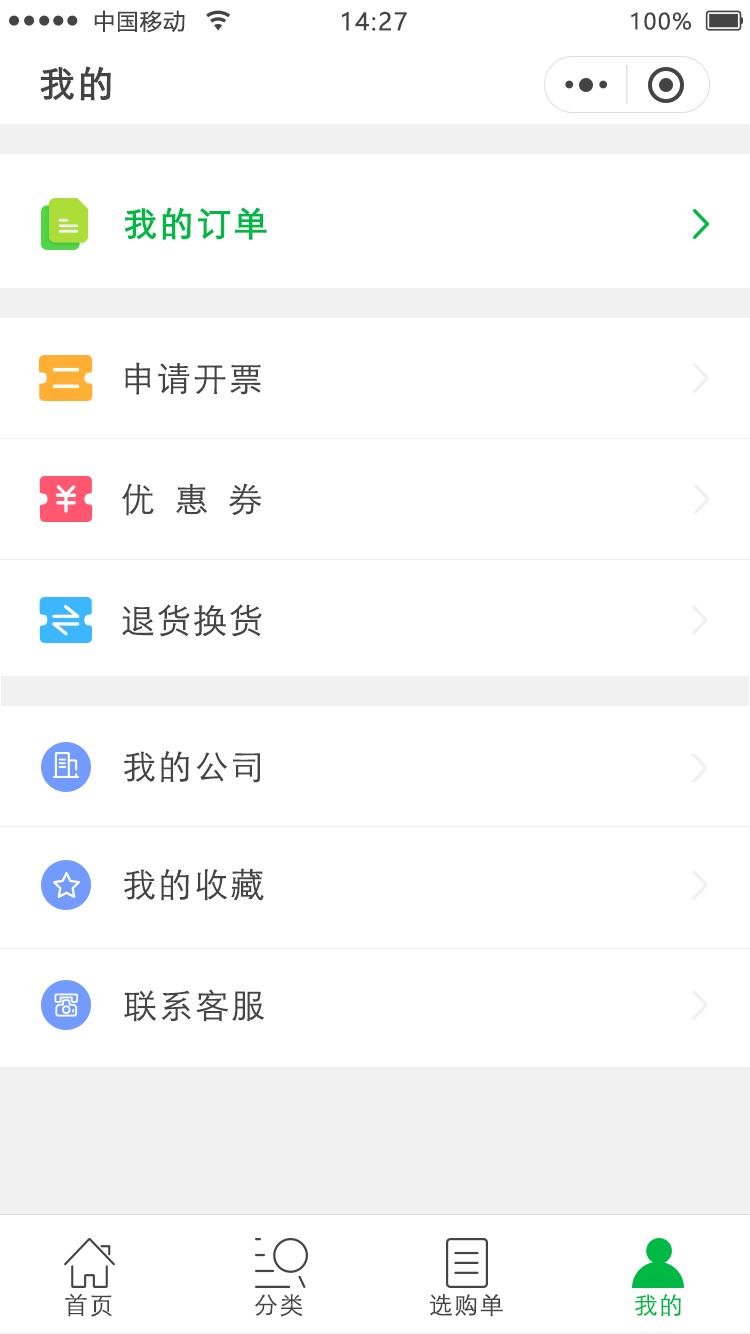
<style>
.page{position:relative;width:750px;height:1334px;background:#ffffff}
.page>*{position:absolute;margin:0}
.t1{font:22px "MicrosoftYaHei";letter-spacing:0.06em;color:#444444}
.t2{font:24px "MicrosoftYaHei";letter-spacing:0.06em;color:#444444}
.t3{font:36px "STXihei";letter-spacing:0.06em;color:#444444;font-weight:bold}
.t4{font:34px "STXihei";letter-spacing:0.06em;color:#00b945;font-weight:bold}
.t5{font:34px "STXihei";letter-spacing:0.06em;color:#444444}
.t6{font:34px "STXihei";letter-spacing:0.58em;color:#444444}
.t7{font:24px "STXihei";letter-spacing:0.06em;color:#444444}
.t8{font:24px "STXihei";letter-spacing:0.06em;color:#00b945}
</style>
<div class="page">
<p class="t1" style="left:94px;top:10px;width:91px;height:23px">中国移动</p>
<p class="t2" style="left:342px;top:11px;width:65px;height:20px">14:27</p>
<p class="t1" style="left:631px;top:12px;width:60px;height:18px">100%</p>
<p class="t3" style="left:40px;top:66px;width:71px;height:35px">我的</p>
<p class="t4" style="left:124px;top:207px;width:143px;height:33px">我的订单</p>
<p class="t5" style="left:125px;top:362px;width:136px;height:33px">申请开票</p>
<p class="t6" style="left:121px;top:483px;width:140px;height:33px">优惠券</p>
<p class="t5" style="left:122px;top:604px;width:140px;height:33px">退货换货</p>
<p class="t5" style="left:124px;top:751px;width:137px;height:32px">我的公司</p>
<p class="t5" style="left:124px;top:868px;width:140px;height:33px">我的收藏</p>
<p class="t5" style="left:124px;top:989px;width:140px;height:33px">联系客服</p>
<p class="t7" style="left:65px;top:1293px;width:47px;height:24px">首页</p>
<p class="t7" style="left:255px;top:1294px;width:48px;height:23px">分类</p>
<p class="t7" style="left:430px;top:1294px;width:73px;height:23px">选购单</p>
<p class="t8" style="left:635px;top:1294px;width:46px;height:23px">我的</p>
</div>
